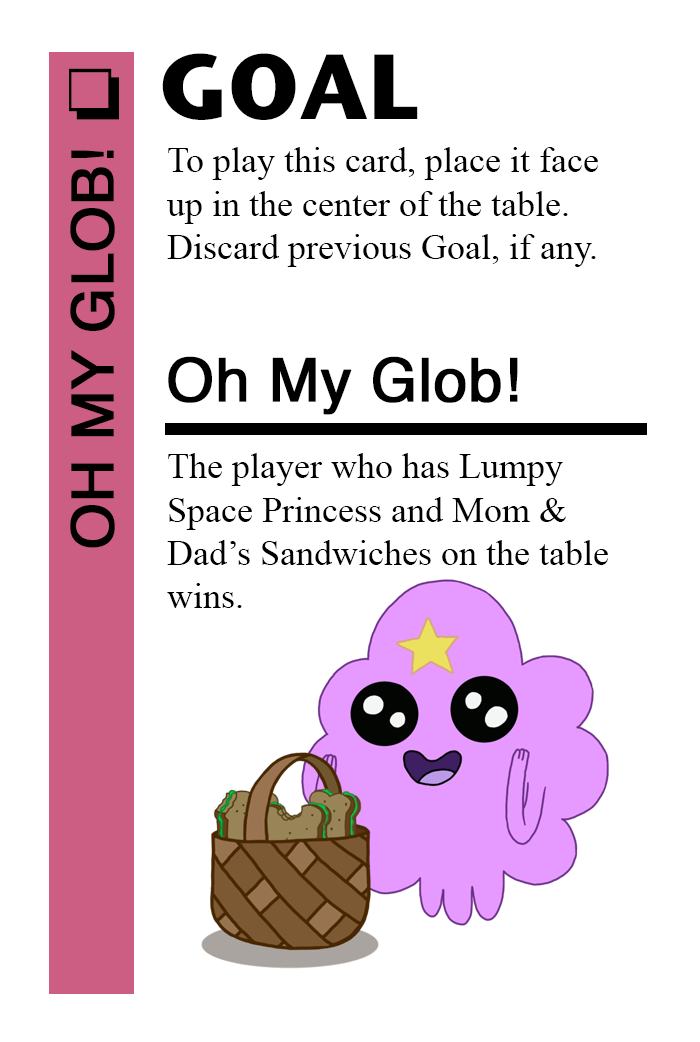
<style>
.page{position:relative;width:700px;height:1042px;background:#ffffff}
.page>*{position:absolute;margin:0}
.t1{font:92px "StoneSansITC-Bold";color:#000000}
.t2{font:72px "MS-Gothic";color:#000000}
.t3{font:58px "Helvetica";color:#000000;font-weight:bold}
.t4{font:36px "TimesNewRomanPSMT";color:#000000}
.t5{font:60px "Helvetica";color:#000000;font-weight:bold}
</style>
<div class="page">
<p class="t1" style="left:162px;top:53px;width:256px;height:67px">GOAL</p>
<p class="t2" style="left:69px;top:68px;width:50px;height:52px">❏</p>
<p class="t3" style="left:70px;top:150px;width:45px;height:398px;rotate:-90deg">OH MY GLOB!</p>
<p class="t4" style="left:167px;top:147px;width:431px;height:120px">To play this card, place it face<br>up in the center of the table.<br>Discard previous Goal, if any.</p>
<p class="t5" style="left:168px;top:356px;width:350px;height:59px">Oh My Glob!</p>
<p class="t4" style="left:167px;top:453px;width:441px;height:155px">The player who has Lumpy <br>Space Princess and Mom &amp;<br>Dad’s Sandwiches on the table <br>wins.</p>
</div>
